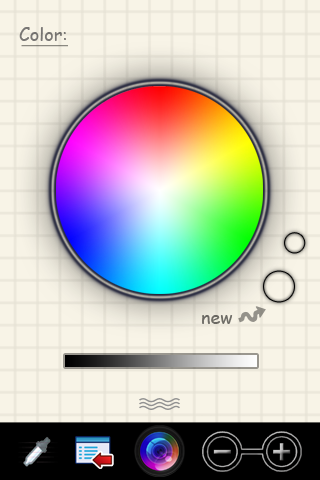
<style>
.page{position:relative;width:320px;height:480px}
.page>*{position:absolute;margin:0}
.t1{font:18px "ComicSansMS";color:#797775}
.t2{font:18px "ComicSansMS";color:#6d6b65}
</style>
<div class="page">
<p class="t1" style="left:19px;top:27px;width:47px;height:14px">Color:</p>
<p class="t2" style="left:202px;top:315px;width:31px;height:9px">new</p>
</div>
